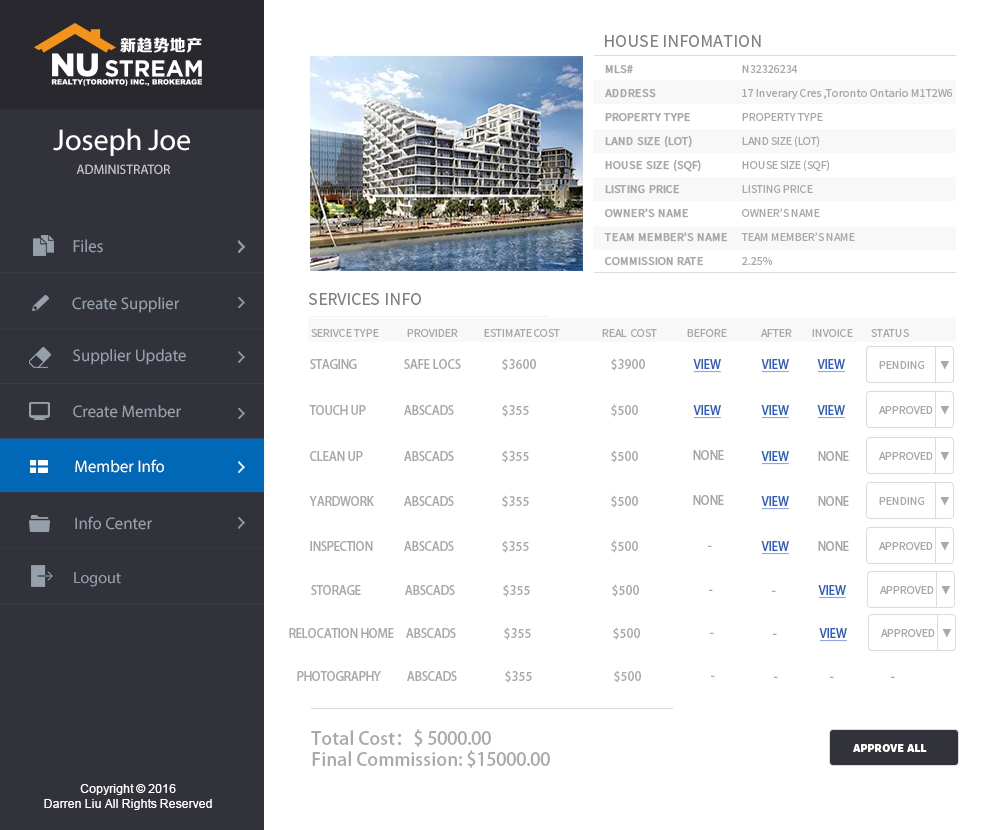
<style>
.page{position:relative;width:1000px;height:830px;background:#ffffff}
.page>*{position:absolute;margin:0}
.t1{font:18px "SourceSansPro-Regular";color:#808080}
.t2{font:12px/24px "SourceSansPro-Regular";color:#a9a9a9;font-weight:bold}
.t3{font:12px/24px "SourceSansPro-Regular";color:#a9a9a9}
.t4{font:30px "MyriadPro-Regular";color:#ffffff}
.t5{font:13.4px "MyriadPro-Regular";color:#cccccc}
.t6{font:17.6px "MyriadPro-Regular";color:#95a0aa;scale:0.96 1}
.t7{font:16.8px "MyriadPro-Regular";color:#95a0aa}
.t8{font:12px "SourceSansPro-Regular";color:#a9a9a9}
.t9{font:12px "AdobeHeitiStd-Regular";color:#a9a9a9}
.t10{font:12px "AdobeHeitiStd-Regular";color:#2b5ccc;text-decoration:underline}
.t11{font:10px "AdobeHeitiStd-Regular";color:#a9a9a9}
.t12{font:16.8px "MyriadPro-Regular";color:#ffffff}
.t13{font:12px "AdobeHeitiStd-Regular";color:#a6a6a7}
.t14{font:16px "MyriadPro-Regular";color:#95a0aa}
.t15{font:18px "AdobeHeitiStd-Regular";color:#a9a9a9}
.t16{font:12px "SourceSansPro-Black";color:#ffffff}
.t17{font:12px "ArialMT";color:#ffffff}
</style>
<div class="page">
<p class="t1" style="left:605px;top:35px;width:156px;height:12px">HOUSE INFOMATION</p>
<p class="t2" style="left:604px;top:65px;width:123px;height:201px">MLS# <br>ADDRESS<br>PROPERTY TYPE<br>LAND SIZE (LOT)<br>HOUSE SIZE (SQF)<br>LISTING PRICE<br>OWNER’S NAME<br>TEAM MEMBER’S NAME<br>COMMISSION RATE</p>
<p class="t3" style="left:741px;top:65px;width:212px;height:200px">N32326234<br>17 Inverary Cres ,Toronto Ontario M1T2W6<br>PROPERTY TYPE<br>LAND SIZE (LOT)<br>HOUSE SIZE (SQF)<br>LISTING PRICE<br>OWNER’S NAME<br>TEAM MEMBER’S NAME<br>2.25%</p>
<p class="t4" style="left:53px;top:128px;width:137px;height:28px">Joseph Joe</p>
<p class="t5" style="left:76px;top:164px;width:94px;height:10px">ADMINISTRATOR</p>
<p class="t6" style="left:73px;top:239px;width:30px;height:14px">Files</p>
<p class="t1" style="left:308px;top:293px;width:113px;height:12px">SERVICES INFO</p>
<p class="t7" style="left:72px;top:297px;width:107px;height:16px">Create Supplier</p>
<p class="t8" style="left:311px;top:329px;width:598px;height:8px">SERIVCE TYPE              PROVIDER             ESTIMATE COST                     REAL  COST               BEFORE                 AFTER          INVOICE         STATUS</p>
<p class="t7" style="left:73px;top:349px;width:113px;height:16px">Supplier Update</p>
<p class="t9" style="left:310px;top:359px;width:47px;height:10px">STAGING</p>
<p class="t9" style="left:404px;top:359px;width:57px;height:10px">SAFE LOCS</p>
<p class="t9" style="left:502px;top:358px;width:34px;height:13px">$3600</p>
<p class="t9" style="left:611px;top:358px;width:34px;height:13px">$3900</p>
<p class="t10" style="left:693px;top:359px;width:28px;height:14px">VIEW</p>
<p class="t10" style="left:761px;top:359px;width:28px;height:14px">VIEW</p>
<p class="t10" style="left:817px;top:359px;width:28px;height:14px">VIEW</p>
<p class="t8" style="left:879px;top:361px;width:46px;height:8px">PENDING</p>
<p class="t8" style="left:879px;top:361px;width:46px;height:8px">PENDING</p>
<p class="t11" style="left:940px;top:361px;width:9px;height:9px">▼</p>
<p class="t7" style="left:73px;top:405px;width:108px;height:13px">Create Member</p>
<p class="t9" style="left:309px;top:405px;width:57px;height:10px">TOUCH UP</p>
<p class="t9" style="left:404px;top:405px;width:50px;height:10px">ABSCADS</p>
<p class="t9" style="left:502px;top:404px;width:27px;height:13px">$355</p>
<p class="t9" style="left:611px;top:404px;width:27px;height:13px">$500</p>
<p class="t10" style="left:693px;top:405px;width:28px;height:14px">VIEW</p>
<p class="t10" style="left:761px;top:405px;width:28px;height:14px">VIEW</p>
<p class="t10" style="left:817px;top:405px;width:28px;height:14px">VIEW</p>
<p class="t8" style="left:879px;top:406px;width:54px;height:8px">APPROVED</p>
<p class="t11" style="left:940px;top:406px;width:9px;height:9px">▼</p>
<p class="t12" style="left:75px;top:459px;width:89px;height:14px">Member Info</p>
<p class="t9" style="left:310px;top:451px;width:53px;height:10px">CLEAN UP</p>
<p class="t9" style="left:404px;top:451px;width:50px;height:10px">ABSCADS</p>
<p class="t9" style="left:502px;top:450px;width:27px;height:13px">$355</p>
<p class="t9" style="left:611px;top:450px;width:27px;height:13px">$500</p>
<p class="t13" style="left:693px;top:450px;width:31px;height:10px">NONE</p>
<p class="t10" style="left:761px;top:451px;width:28px;height:14px">VIEW</p>
<p class="t13" style="left:818px;top:451px;width:31px;height:10px">NONE</p>
<p class="t8" style="left:879px;top:452px;width:54px;height:8px">APPROVED</p>
<p class="t11" style="left:940px;top:452px;width:9px;height:9px">▼</p>
<p class="t9" style="left:309px;top:496px;width:65px;height:10px">YARDWORK</p>
<p class="t9" style="left:404px;top:496px;width:50px;height:10px">ABSCADS</p>
<p class="t9" style="left:502px;top:495px;width:27px;height:13px">$355</p>
<p class="t9" style="left:611px;top:495px;width:27px;height:13px">$500</p>
<p class="t13" style="left:693px;top:495px;width:31px;height:10px">NONE</p>
<p class="t10" style="left:761px;top:496px;width:28px;height:14px">VIEW</p>
<p class="t13" style="left:818px;top:496px;width:31px;height:10px">NONE</p>
<p class="t8" style="left:879px;top:497px;width:46px;height:8px">PENDING</p>
<p class="t11" style="left:940px;top:497px;width:9px;height:9px">▼</p>
<p class="t7" style="left:75px;top:516px;width:77px;height:14px">Info Center</p>
<p class="t9" style="left:310px;top:541px;width:63px;height:10px">INSPECTION</p>
<p class="t9" style="left:404px;top:541px;width:50px;height:10px">ABSCADS</p>
<p class="t9" style="left:502px;top:540px;width:27px;height:13px">$355</p>
<p class="t9" style="left:611px;top:540px;width:27px;height:13px">$500</p>
<p class="t13" style="left:708px;top:545px;width:4px;height:2px">-</p>
<p class="t10" style="left:761px;top:541px;width:28px;height:14px">VIEW</p>
<p class="t13" style="left:818px;top:541px;width:31px;height:10px">NONE</p>
<p class="t8" style="left:879px;top:542px;width:54px;height:8px">APPROVED</p>
<p class="t11" style="left:940px;top:542px;width:9px;height:9px">▼</p>
<p class="t14" style="left:74px;top:572px;width:47px;height:15px">Logout</p>
<p class="t9" style="left:311px;top:585px;width:50px;height:10px">STORAGE</p>
<p class="t9" style="left:405px;top:585px;width:50px;height:10px">ABSCADS</p>
<p class="t9" style="left:503px;top:584px;width:27px;height:13px">$355</p>
<p class="t9" style="left:612px;top:584px;width:27px;height:13px">$500</p>
<p class="t13" style="left:709px;top:589px;width:4px;height:2px">-</p>
<p class="t13" style="left:772px;top:590px;width:4px;height:2px">-</p>
<p class="t10" style="left:818px;top:585px;width:28px;height:14px">VIEW</p>
<p class="t8" style="left:880px;top:586px;width:54px;height:8px">APPROVED</p>
<p class="t11" style="left:941px;top:586px;width:9px;height:9px">▼</p>
<p class="t9" style="left:289px;top:628px;width:105px;height:10px">RELOCATION HOME</p>
<p class="t9" style="left:406px;top:628px;width:50px;height:10px">ABSCADS</p>
<p class="t9" style="left:504px;top:627px;width:27px;height:13px">$355</p>
<p class="t9" style="left:613px;top:627px;width:27px;height:13px">$500</p>
<p class="t10" style="left:819px;top:628px;width:28px;height:14px">VIEW</p>
<p class="t8" style="left:881px;top:629px;width:54px;height:8px">APPROVED</p>
<p class="t11" style="left:942px;top:629px;width:9px;height:9px">▼</p>
<p class="t13" style="left:710px;top:632px;width:4px;height:2px">-</p>
<p class="t13" style="left:773px;top:633px;width:4px;height:2px">-</p>
<p class="t9" style="left:297px;top:671px;width:84px;height:10px">PHOTOGRAPHY</p>
<p class="t9" style="left:407px;top:671px;width:50px;height:10px">ABSCADS</p>
<p class="t9" style="left:505px;top:670px;width:27px;height:13px">$355</p>
<p class="t9" style="left:614px;top:670px;width:27px;height:13px">$500</p>
<p class="t13" style="left:711px;top:675px;width:4px;height:2px">-</p>
<p class="t13" style="left:774px;top:676px;width:4px;height:2px">-</p>
<p class="t13" style="left:830px;top:676px;width:4px;height:2px">-</p>
<p class="t13" style="left:891px;top:676px;width:4px;height:2px">-</p>
<p class="t15" style="left:311px;top:729px;width:239px;height:39px">Total Cost：$ 5000.00<br>Final Commission: $15000.00</p>
<p class="t16" style="left:853px;top:744px;width:74px;height:8px">APPROVE ALL</p>
<p class="t17" style="left:44px;top:784px;width:168px;height:26px;text-align:center">Copyright © 2016<br>Darren Liu All Rights Reserved</p>
</div>
